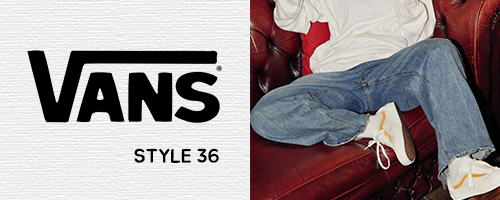
<style>
.page{position:relative;width:500px;height:200px}
.page>*{position:absolute;margin:0}
.t1{font:19.6px "BMJUA";color:#000000}
</style>
<div class="page">
<p class="t1" style="left:134px;top:148px;width:85px;height:15px">STYLE 36</p>
</div>
